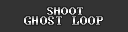
<style>
.page{position:relative;width:128px;height:32px;background:#333333}
.page>*{position:absolute;margin:0}
.t1{font:14px "Terminal"}
</style>
<div class="page">
<p class="t1" style="left:24px;top:16px;width:79px;height:9px">GHOST LOOP</p>
</div>
